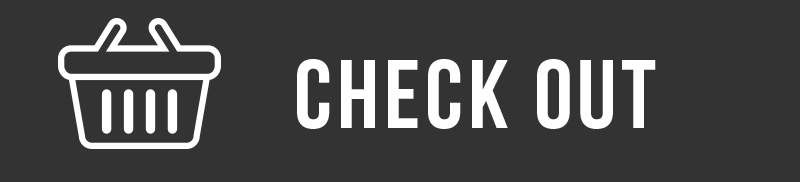
<style>
.page{position:relative;width:800px;height:182px;background:#333333}
.page>*{position:absolute;margin:0}
.t1{font:97px "BebasNeue";letter-spacing:0.05em;color:#ffffff}
</style>
<div class="page">
<p class="t1" style="left:297px;top:59px;width:359px;height:70px">check out</p>
</div>
